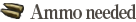
<style>
.page{position:relative;width:136px;height:22px;background:#ffffff}
.page>*{position:absolute;margin:0}
.t1{font:20px "RyuminPro-ExBold";letter-spacing:-0.08em;color:#4d4843;scale:0.9 1}
</style>
<div class="page">
<p class="t1" style="left:30px;top:4px;width:106px;height:15px">Ammo needed</p>
</div>
